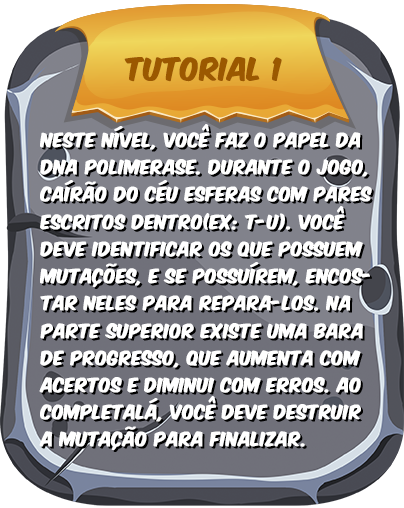
<style>
.page{position:relative;width:404px;height:508px;background:#ffffff}
.page>*{position:absolute;margin:0}
.t1{font:16.8px/27.2px "KomikaAxis";color:#ffffff;font-weight:bold}
</style>
<div class="page">
<p class="t1" style="left:39px;top:124px;width:333px;height:326px">nESTE NÍVEL, VOCÊ FAZ O PAPEL DA <br>dna polimerase. DURANTE o JOGO, <br>CAíRÃO do céu ESFERAS COM PARES <br>ESCRITOS DENTRO(EX: T-U). VOCÊ <br>DEVE IDENTIFICAR OS QUE POSSUEM <br>MUTAÇÕES, E SE POSSUÍREM, ENCos-<br>tar NELES PARA REPARA-LOS. Na <br>parte superior existe uma bara <br>de progresso, que aumenta com <br>acertos e diminui com erros. ao<br>completalá, você deve destruir<br>a mutação para finalizar.</p>
</div>
